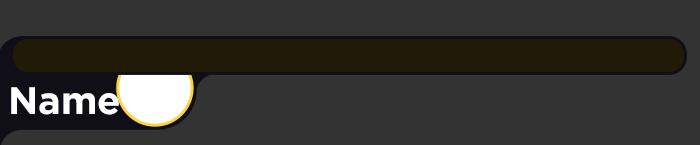
<style>
.page{position:relative;width:700px;height:145px;background:#333333}
.page>*{position:absolute;margin:0}
.t1{font:38.4px "Gotham-Bold";color:#ffffff}
</style>
<div class="page">
<p class="t1" style="left:11px;top:87px;width:108px;height:28px">Name</p>
</div>
